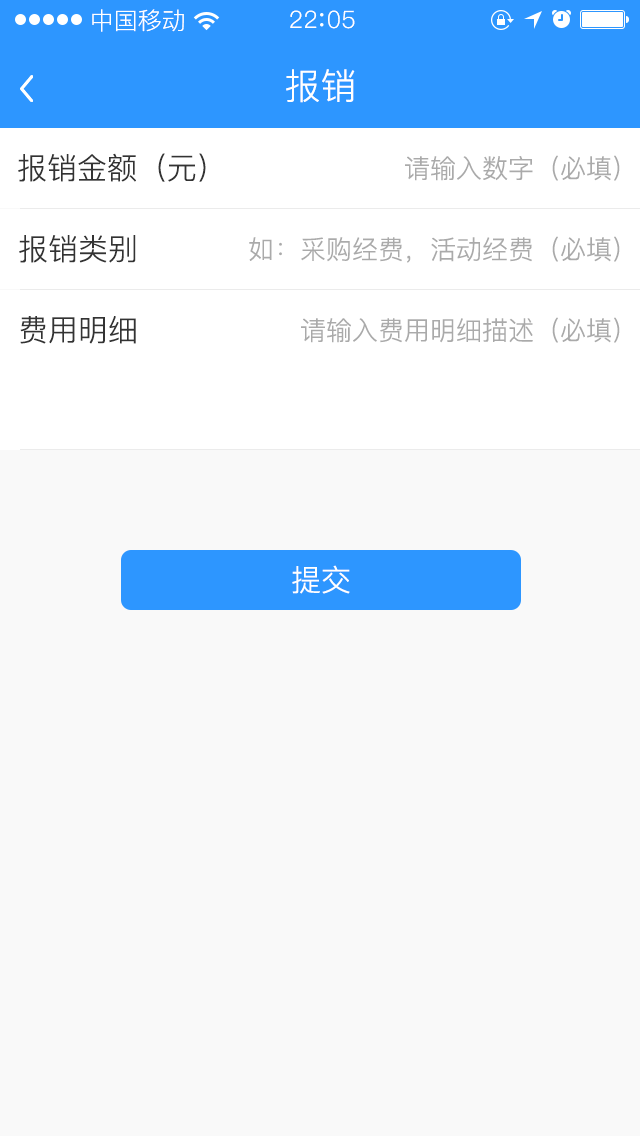
<style>
.page{position:relative;width:640px;height:1136px;background:#f9f9f9}
.page>*{position:absolute;margin:0}
.t1{font:24px "PingFang-SC-Regular";color:#ffffff}
.t2{font:24px "PingFang-SC-Regular";letter-spacing:0.03em;color:#ffffff}
.t3{font:36px "PingFang-SC-Regular";color:#ffffff}
.t4{font:30px "PingFang-SC-Regular";color:#333333}
.t5{font:26px "PingFang-SC-Regular";color:#aaaaaa}
.t6{font:30px "PingFang-SC-Regular";color:#ffffff}
</style>
<div class="page">
<p class="t1" style="left:92px;top:9px;width:92px;height:23px">中国移动</p>
<p class="t2" style="left:290px;top:10px;width:65px;height:19px">22 05</p>
<p class="t3" style="left:286px;top:69px;width:69px;height:34px">报销</p>
<p class="t4" style="left:18px;top:153px;width:188px;height:29px">报销金额（元）</p>
<p class="t5" style="left:405px;top:155px;width:215px;height:26px">请输入数字（必填）</p>
<p class="t4" style="left:19px;top:235px;width:117px;height:28px">报销类别</p>
<p class="t5" style="left:249px;top:236px;width:371px;height:27px">如：采购经费，活动经费（必填）</p>
<p class="t4" style="left:20px;top:316px;width:116px;height:28px">费用明细</p>
<p class="t5" style="left:301px;top:317px;width:319px;height:26px">请输入费用明细描述（必填）</p>
<p class="t6" style="left:292px;top:565px;width:58px;height:29px">提交</p>
</div>
